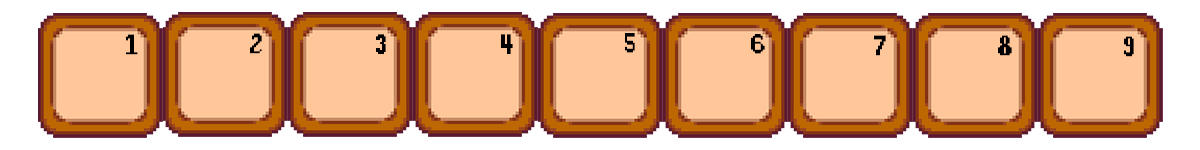
<style>
.page{position:relative;width:1200px;height:150px;background:#ffc699}
.page>*{position:absolute;margin:0}
.t1{font:33.6px "Stardew-Valley";color:#000000}
</style>
<div class="page">
<p class="t1" style="left:126px;top:34px;width:12px;height:21px">1</p>
<p class="t1" style="left:250px;top:33px;width:12px;height:21px">2</p>
<p class="t1" style="left:376px;top:34px;width:10px;height:20px">3</p>
<p class="t1" style="left:501px;top:34px;width:12px;height:20px">4</p>
<p class="t1" style="left:625px;top:33px;width:10px;height:20px">5</p>
<p class="t1" style="left:751px;top:34px;width:14px;height:20px">6</p>
<p class="t1" style="left:874px;top:35px;width:12px;height:21px">7</p>
<p class="t1" style="left:998px;top:35px;width:14px;height:21px">8</p>
<p class="t1" style="left:1124px;top:36px;width:10px;height:21px">9</p>
</div>
